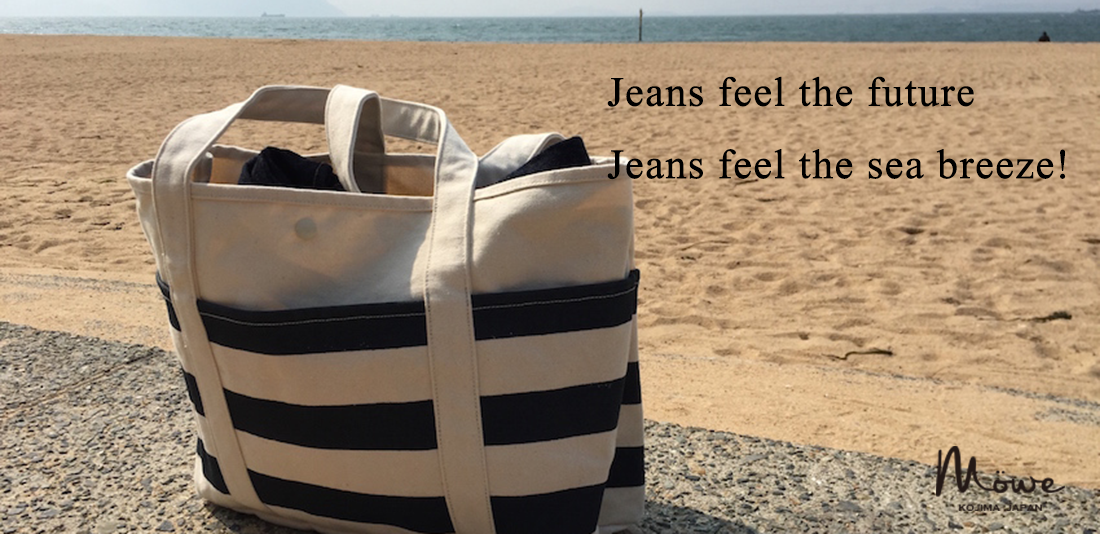
<style>
.page{position:relative;width:1100px;height:534px}
.page>*{position:absolute;margin:0}
.t1{font:62.1px/18.1px "MicrosoftHimalaya";color:#000000;font-weight:bold}
</style>
<div class="page">
<p class="t1" style="left:607px;top:76px;width:459px;height:104px">Jeans feel the future<br><br> <br><br>Jeans feel the sea breeze!</p>
</div>
